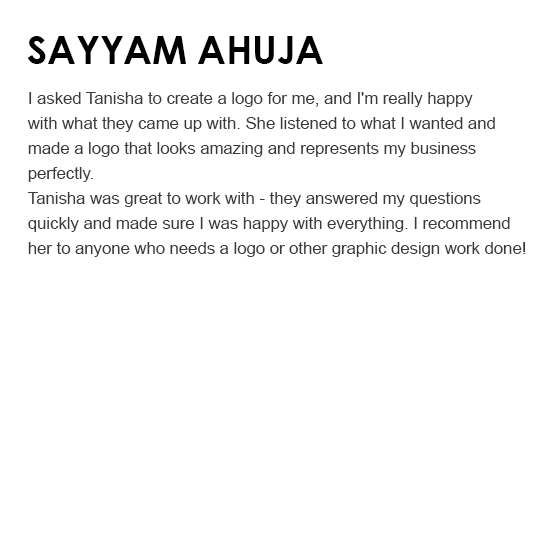
<style>
.page{position:relative;width:559px;height:559px;background:#ffffff}
.page>*{position:absolute;margin:0}
.t1{font:38.6px "CenturyGothic-Bold";color:#000000;text-transform:uppercase}
.t2{font:16.7px/25px "ArialMT";color:#3a3a3a}
</style>
<div class="page">
<p class="t1" style="left:27px;top:36px;width:296px;height:28px">Sayyam Ahuja</p>
<p class="t2" style="left:27px;top:92px;width:499px;height:165px">I asked Tanisha to create a logo for me, and I'm really happy <br>with what they came up with. She listened to what I wanted and <br>made a logo that looks amazing and represents my business <br>perfectly. <br>Tanisha was great to work with - they answered my questions <br>quickly and made sure I was happy with everything. I recommend <br>her to anyone who needs a logo or other graphic design work done!</p>
</div>
